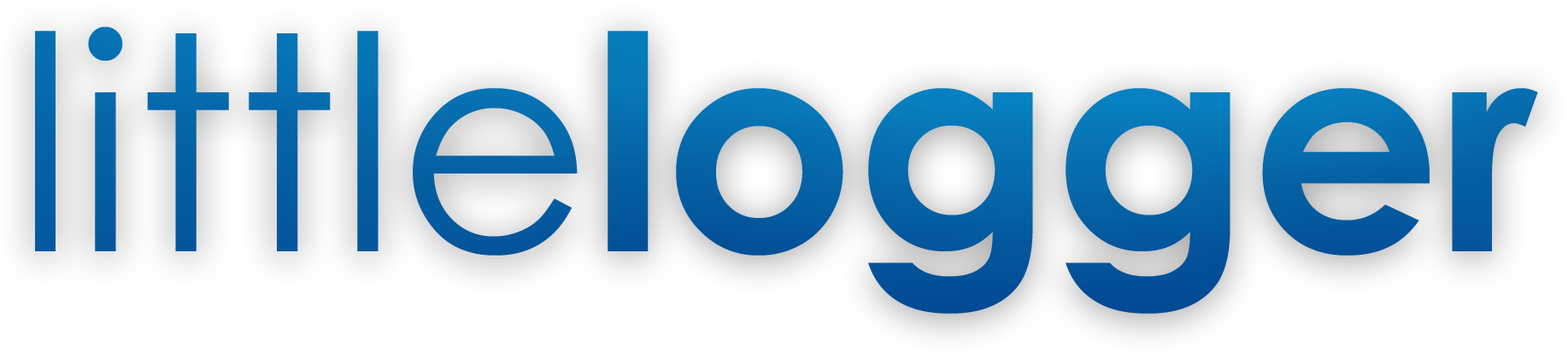
<style>
.page{position:relative;width:1568px;height:353px;background:#ffffff}
.page>*{position:absolute;margin:0}
.t1{font:299.1px "CenturyGothic";color:#0563a5}
.t2{font:299.1px "CenturyGothic-Bold";color:#0563a5}
</style>
<div class="page">
<p class="t1" style="left:35px;top:26px;width:1503px;height:288px">little<span class="t2">logger</span></p>
</div>
